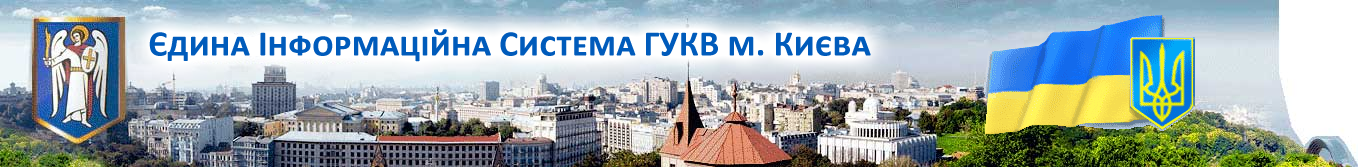
<style>
.page{position:relative;width:1358px;height:167px}
.page>*{position:absolute;margin:0}
.t1{font:36px "Calibri-Bold";color:#005bbb;font-variant:small-caps}
</style>
<div class="page">
<p class="t1" style="left:149px;top:29px;width:722px;height:33px">Єдина Інформаційна Система ГУКВ м. Києва</p>
</div>
